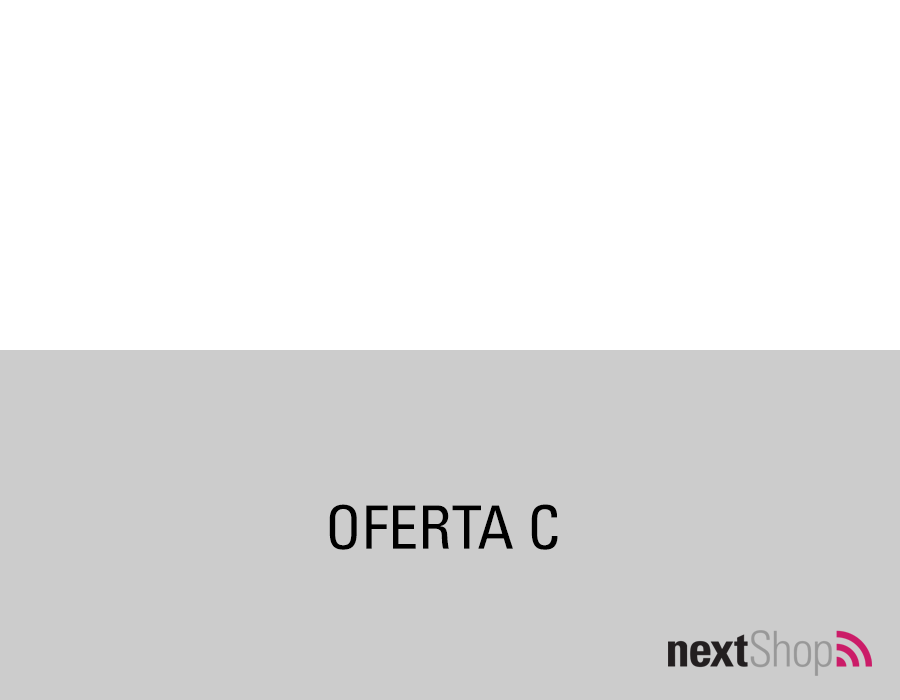
<style>
.page{position:relative;width:900px;height:700px;background:#ffffff}
.page>*{position:absolute;margin:0}
.t1{font:60px "UniversLTStd-Cn";color:#000000}
</style>
<div class="page">
<p class="t1" style="left:329px;top:504px;width:229px;height:46px">OFERTA C</p>
</div>
